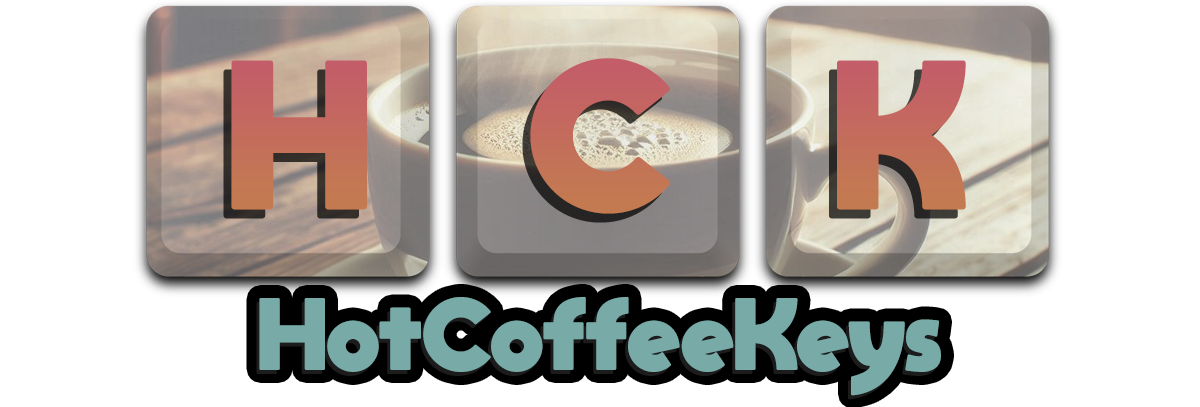
<style>
.page{position:relative;width:1200px;height:407px;background:#ffffff}
.page>*{position:absolute;margin:0}
.t1{font:148.7px "moon_get-Heavy";color:#c36c5d}
.t2{font:72px "moon_get-Heavy";color:#78aba8}
</style>
<div class="page">
<p class="t1" style="left:231px;top:60px;width:136px;height:150px">H</p>
<p class="t1" style="left:530px;top:58px;width:140px;height:156px">C</p>
<p class="t1" style="left:837px;top:60px;width:129px;height:150px">K</p>
<p class="t2" style="left:259px;top:296px;width:682px;height:100px">HotCoffeeKeys</p>
</div>
